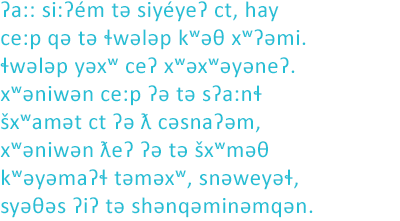
<style>
.page{position:relative;width:400px;height:221px;background:#ffffff}
.page>*{position:absolute;margin:0}
.t1{font:23px/28px "Calibri";letter-spacing:0.023em;color:#26bfd5}
</style>
<div class="page">
<p class="t1" style="left:0px;top:1px;width:313px;height:217px">ʔa:: si:ʔém̓ tə siyéy̓eʔ ct, hay ce:p q̓ə tə ɬwələp k̓ʷəθ xʷʔəm̓i. ɬwələp yəxʷ ceʔ xʷəxʷəy̓əneʔ. xʷən̓iwən ce:p ʔə tə sʔa:nɬ šxʷam̓ət ct ʔə ƛ̓ c̓əsnaʔəm, xʷən̓iwən ƛ̓eʔ ʔə tə šxʷməθkʷəy̓əmaʔɬ təməxʷ, snəw̓eyəɬ, syəθəs ʔiʔ tə shən̓q̓əmin̓əm̓qən.</p>
</div>
